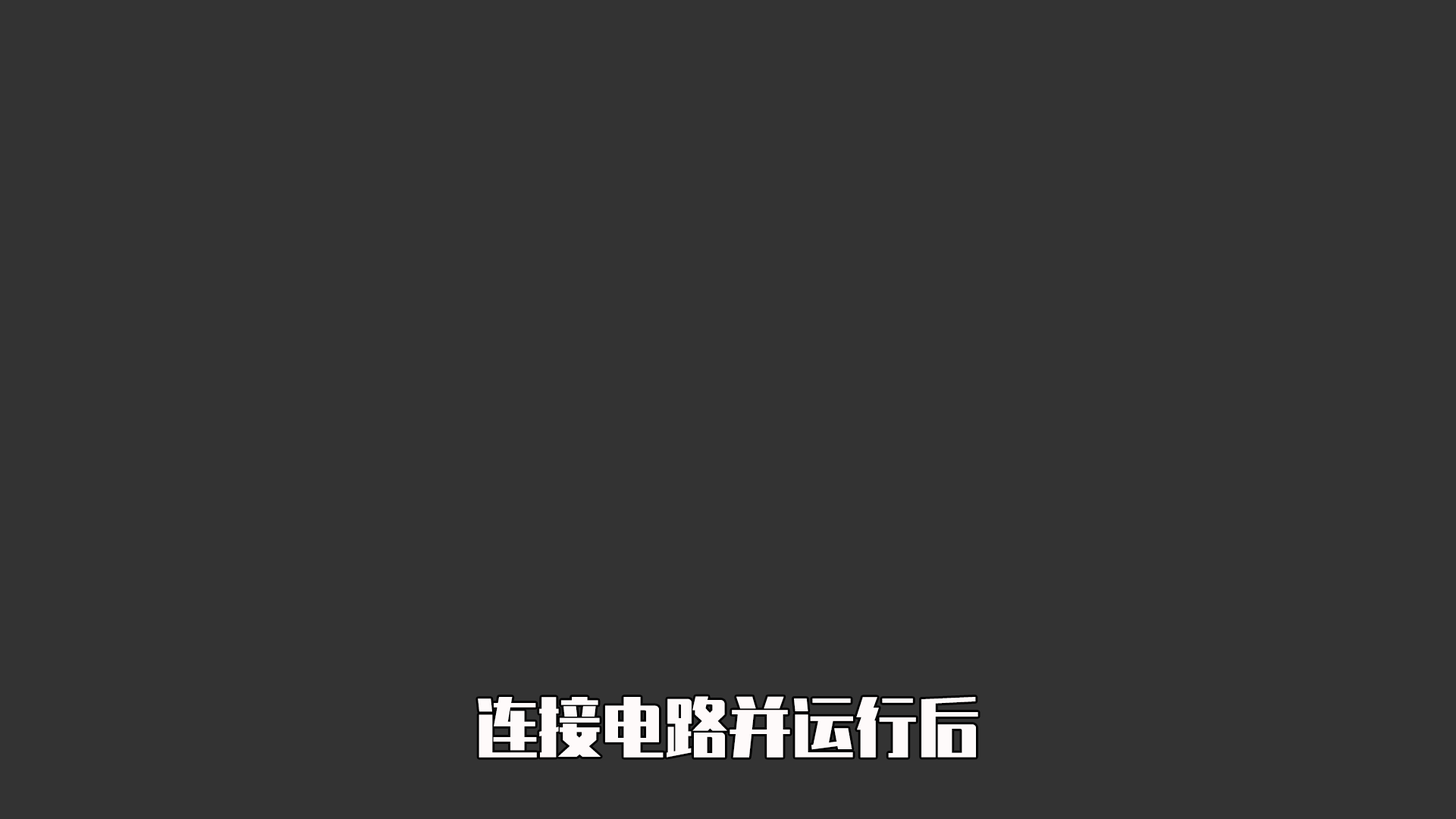
<style>
.page{position:relative;width:1456px;height:819px;background:#333333}
.page>*{position:absolute;margin:0}
.t1{font:63.2px "ZhenyanGB-Regular";color:#fefafa}
</style>
<div class="page">
<p class="t1" style="left:478px;top:696px;width:500px;height:62px">连接电路并运行后</p>
</div>
